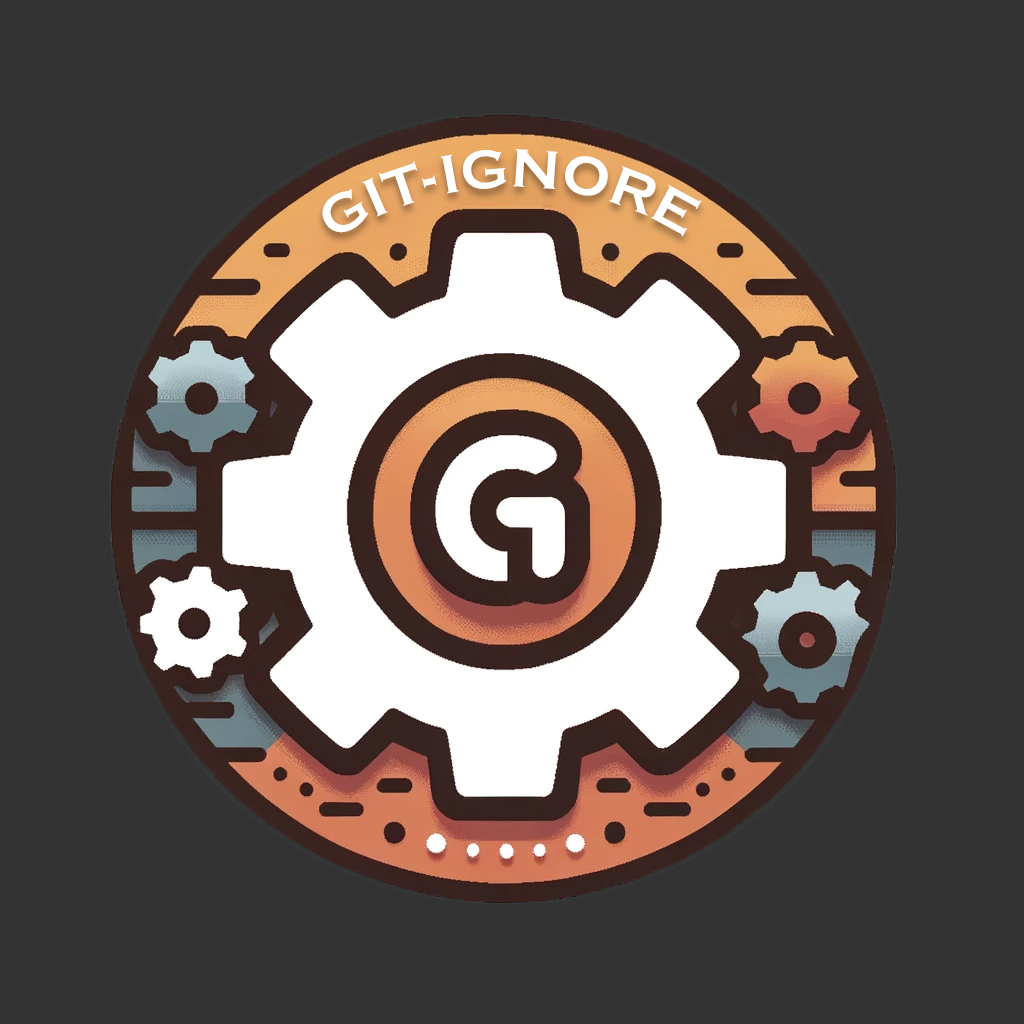
<style>
.page{position:relative;width:1024px;height:1024px;background:#333333}
.page>*{position:absolute;margin:0}
.t1{font:56px "CopperplateGothic-Bold";color:#ffffff}
.t2{font:56px "CopperplateGothic-Bold";letter-spacing:0.1em;color:#ffffff}
</style>
<div class="page">
<p class="t1" style="left:322px;top:149px;width:380px;height:88px">GIT<span class="t2">-</span>IGNORE</p>
</div>
